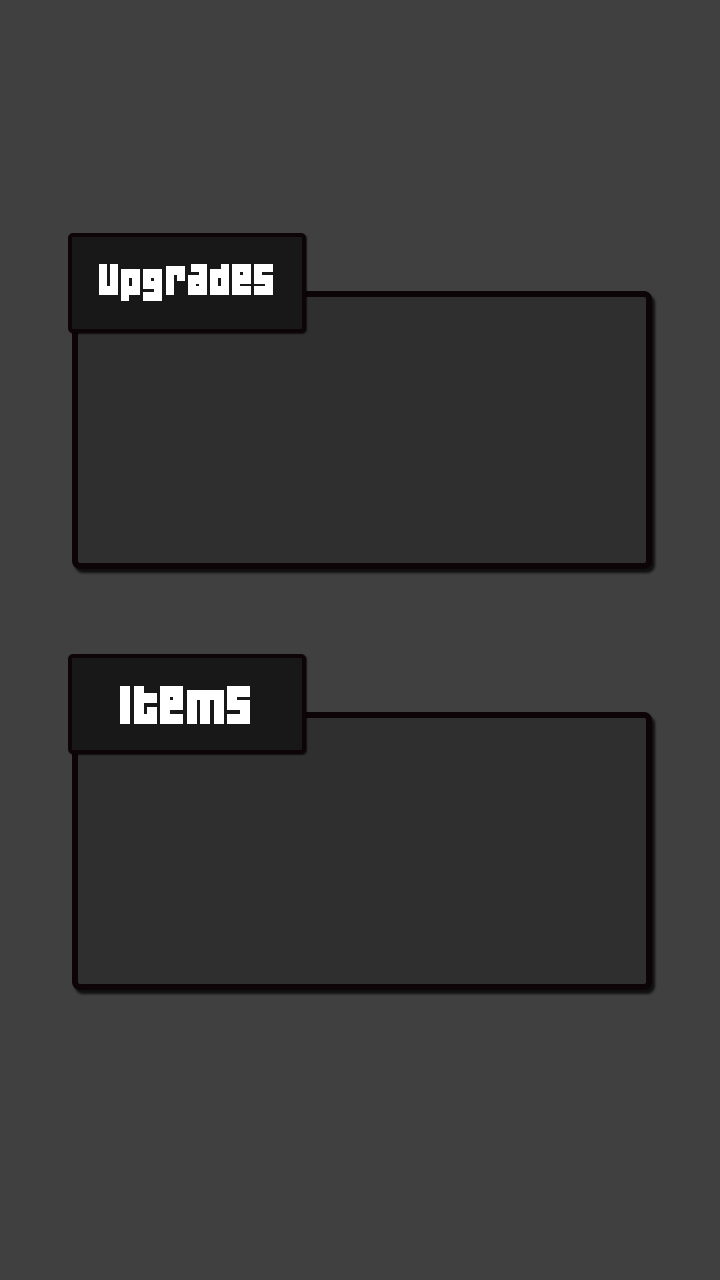
<style>
.page{position:relative;width:720px;height:1280px;background:#404040}
.page>*{position:absolute;margin:0}
.t1{font:40px "04b19";color:#ffffff;scale:0.97 1}
.t2{font:48px "04b19";color:#ffffff;scale:0.97 1}
</style>
<div class="page">
<p class="t1" style="left:99px;top:264px;width:174px;height:37px">Upgrades</p>
<p class="t2" style="left:120px;top:686px;width:130px;height:38px">Items</p>
</div>
